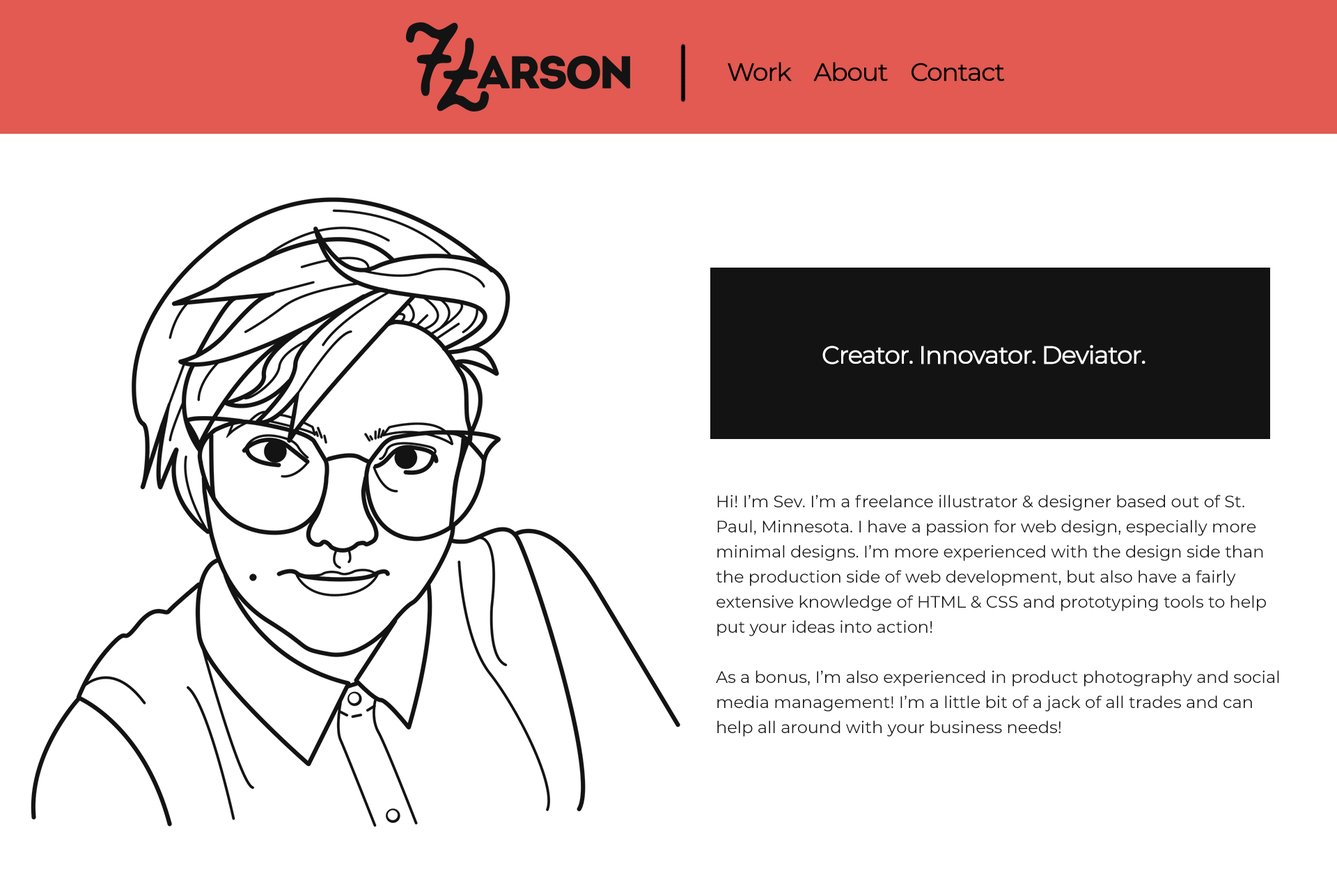
<style>
.page{position:relative;width:1337px;height:892px;background:#ffffff}
.page>*{position:absolute;margin:0}
.t1{font:25.1px "Montserrat-Regular";letter-spacing:-0.06em;color:#000000;font-weight:bold}
.t2{font:25.1px "Montserrat-Regular";letter-spacing:-0.06em;color:#ffffff;font-weight:bold}
.t3{font:16.7px/25.1px "Montserrat-Regular";color:#131313}
</style>
<div class="page">
<p class="t1" style="left:728px;top:62px;width:277px;height:19px">Work    About    Contact</p>
<p class="t2" style="left:823px;top:345px;width:323px;height:19px">Creator. Innovator. Deviator.</p>
<p class="t3" style="left:716px;top:495px;width:564px;height:241px">Hi! I’m Sev. I’m a freelance illustrator &amp; designer based out of St.<br>Paul, Minnesota. I have a passion for web design, especially more<br>minimal designs. I’m more experienced with the design side than<br>the production side of web development, but also have a fairly<br>extensive knowledge of HTML &amp; CSS and prototyping tools to help<br>put your ideas into action!<br><br>As a bonus, I’m also experienced in product photography and social<br>media management! I’m a little bit of a jack of all trades and can<br>help all around with your business needs!</p>
</div>
